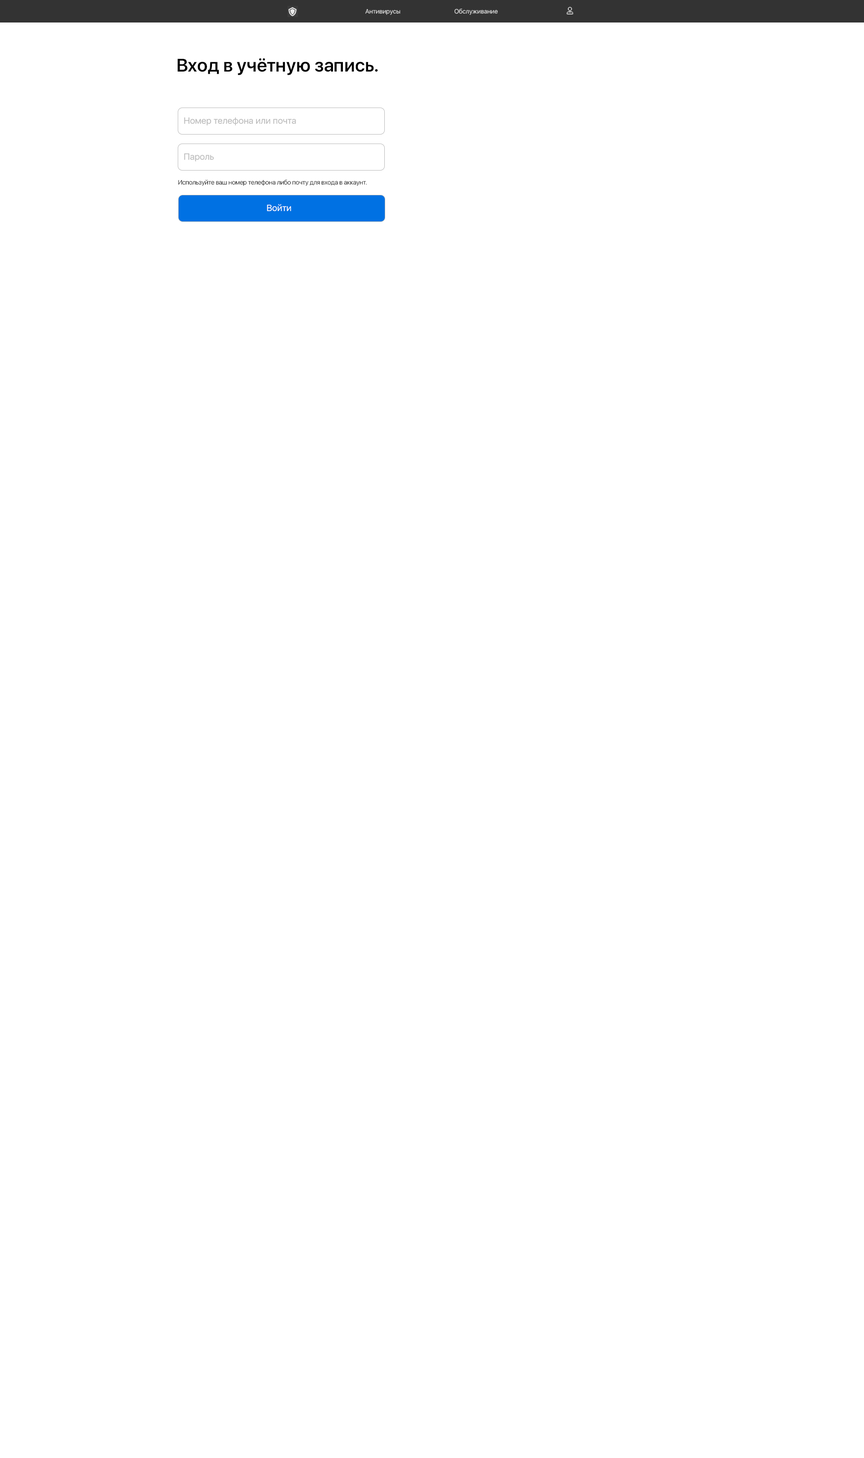
<style>
.page{position:relative;width:864px;height:1458px;background:#ffffff}
.page>*{position:absolute;margin:0}
.t1{font:6.3px "SFUIDisplay-Regular";color:#d8d8d8}
.t2{font:18px "SFUIDisplay-Semibold";color:#000000}
.t3{font:9px "SFUIDisplay-Regular";color:#b9b9b9}
.t4{font:6.3px "SFUIDisplay-Light";color:#000000}
.t5{font:9px "SFUIDisplay-Regular";color:#ffffff}
</style>
<div class="page">
<p class="t1" style="left:365px;top:9px;width:35px;height:6px">Антивирусы</p>
<p class="t1" style="left:454px;top:9px;width:44px;height:6px">Обслуживание</p>
<p class="t2" style="left:177px;top:58px;width:201px;height:17px">Вход в учётную запись.</p>
<p class="t3" style="left:184px;top:117px;width:112px;height:9px">Номер телефона или почта</p>
<p class="t3" style="left:184px;top:153px;width:30px;height:9px">Пароль</p>
<p class="t4" style="left:178px;top:180px;width:189px;height:6px">Используйте ваш номер телефона либо почту для входа в аккаунт.</p>
<p class="t5" style="left:267px;top:204px;width:24px;height:8px">Войти</p>
</div>
